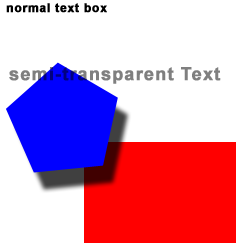
<style>
.page{position:relative;width:242px;height:248px;background:#ffffff}
.page>*{position:absolute;margin:0}
.t1{font:12px "Arial-BoldMT";letter-spacing:0.04em;color:#000000;font-weight:bold}
.t2{font:18px "Arial-BoldMT";letter-spacing:0.04em;color:#7f7f7f;font-weight:bold}
</style>
<div class="page">
<p class="t1" style="left:6px;top:3px;width:101px;height:10px">normal text box</p>
<p class="t2" style="left:9px;top:67px;width:212px;height:17px">semi-transparent Text</p>
</div>
